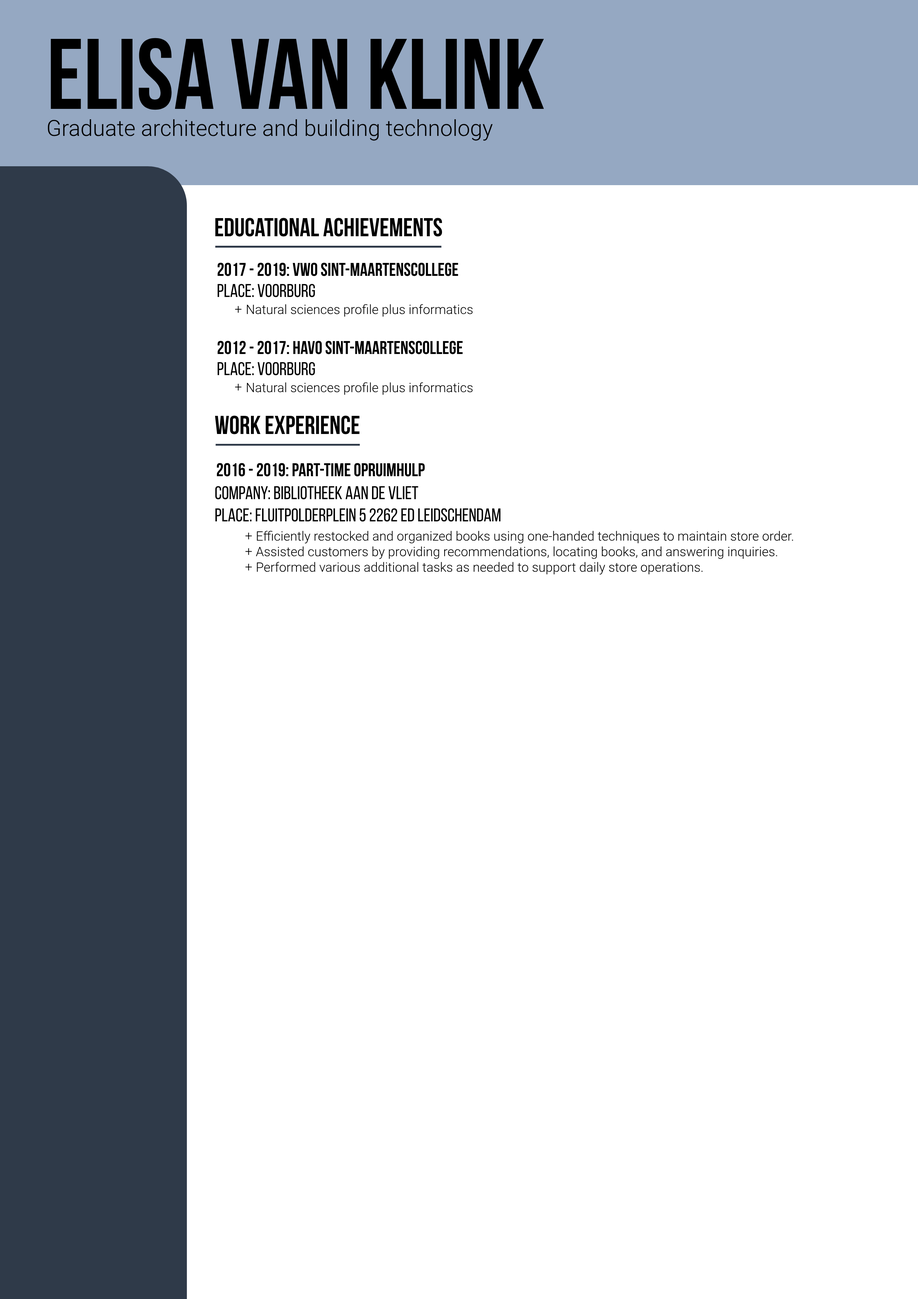
<style>
.page{position:relative;width:918px;height:1299px;background:#ffffff}
.page>*{position:absolute;margin:0}
.t1{font:100px "BebasNeueBold";color:#000000}
.t2{font:22.2px "Roboto-Light";color:#000000}
.t3{font:25.9px "BebasNeueBold";color:#000000}
.t4{font:18.5px "BebasNeueBold";color:#000000}
.t5{font:18.5px "BebasNeueRegular";color:#000000}
.t6{font:13px "Roboto-Light";color:#000000}
</style>
<div class="page">
<p class="t1" style="left:51px;top:38px;width:493px;height:72px">Elisa van Klink</p>
<p class="t2" style="left:48px;top:119px;width:445px;height:22px">Graduate architecture and building technology</p>
<p class="t3" style="left:215px;top:218px;width:227px;height:19px">Educational achievements</p>
<p class="t4" style="left:217px;top:262px;width:241px;height:14px">2017 - 2019: VWO Sint-maartenscollege</p>
<p class="t5" style="left:217px;top:284px;width:98px;height:13px">Place: Voorburg</p>
<p class="t6" style="left:235px;top:306px;width:7px;height:85px">+<br><br><br><br><br>+</p>
<p class="t6" style="left:247px;top:304px;width:226px;height:13px">Natural sciences profile plus informatics</p>
<p class="t4" style="left:217px;top:341px;width:246px;height:13px">2012 - 2017: HAVO Sint-maartenscollege</p>
<p class="t5" style="left:217px;top:362px;width:98px;height:13px">Place: Voorburg</p>
<p class="t6" style="left:247px;top:382px;width:226px;height:13px">Natural sciences profile plus informatics</p>
<p class="t3" style="left:215px;top:415px;width:144px;height:19px">Work experience</p>
<p class="t4" style="left:217px;top:463px;width:208px;height:13px">2016 - 2019: part-time Opruimhulp</p>
<p class="t5" style="left:215px;top:486px;width:286px;height:36px">Company: Bibliotheek aan de vliet<br>Place: Fluitpolderplein 5 2262 ED leidschendam</p>
<p class="t6" style="left:245px;top:532px;width:7px;height:39px">+<br>+<br>+</p>
<p class="t6" style="left:256px;top:531px;width:537px;height:44px">Efficiently restocked and organized books using one-handed techniques to maintain store order.<br>Assisted customers by providing recommendations, locating books, and answering inquiries.<br>Performed various additional tasks as needed to support daily store operations.</p>
</div>
